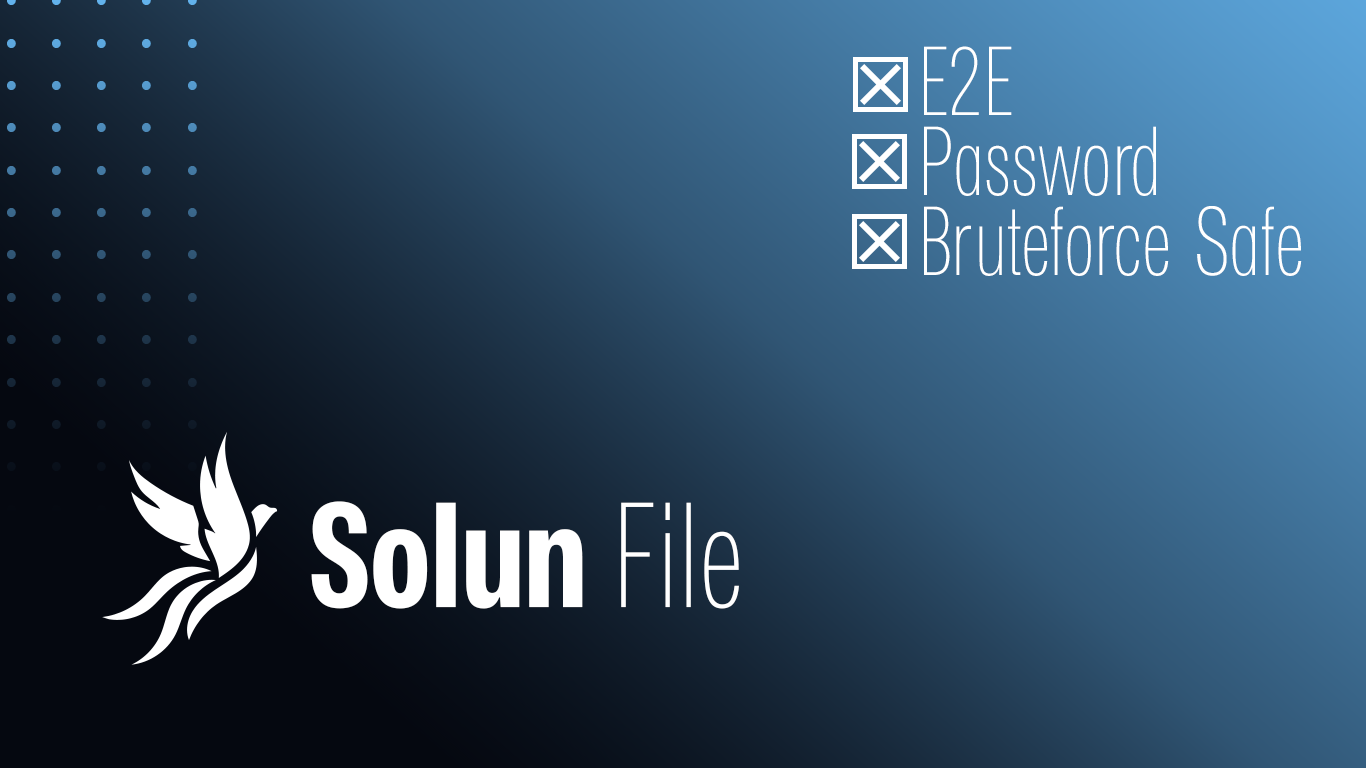
<style>
.page{position:relative;width:1366px;height:768px}
.page>*{position:absolute;margin:0}
.t1{font:93.8px/80px "MonaSans-UltraLightNarrow";color:#ffffff}
.t2{font:143px "MonaSans-BoldNarrow";color:#ffffff}
.t3{font:143px "MonaSans-UltraLightNarrow";color:#ffffff}
</style>
<div class="page">
<p class="t1" style="left:924px;top:46px;width:378px;height:230px">E2E<br>Password<br>Bruteforce Safe</p>
<p class="t2" style="left:311px;top:501px;width:428px;height:108px">Solun <span class="t3">File</span></p>
</div>
